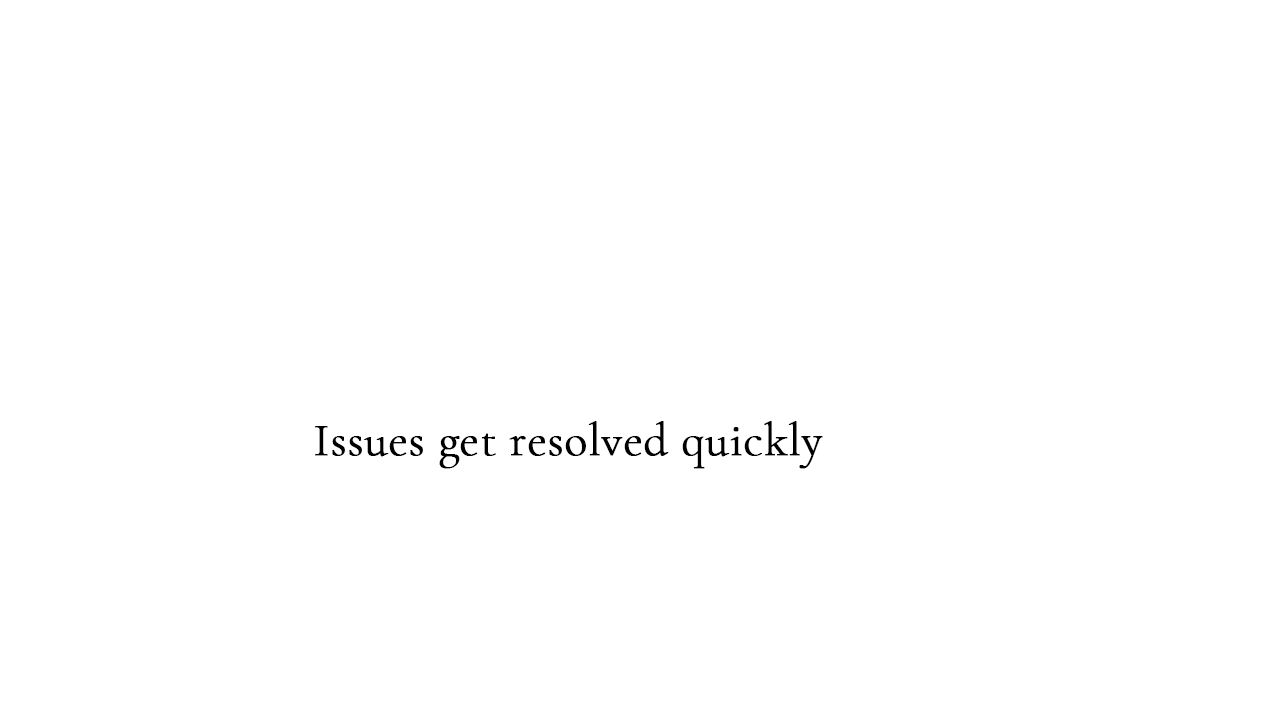
<style>
.page{position:relative;width:1280px;height:720px;background:#ffffff}
.page>*{position:absolute;margin:0}
.t1{font:47px "CormorantGaramond-Light";color:#000000;font-weight:bold}
</style>
<div class="page">
<p class="t1" style="left:315px;top:421px;width:508px;height:48px">Issues get resolved quickly</p>
</div>
